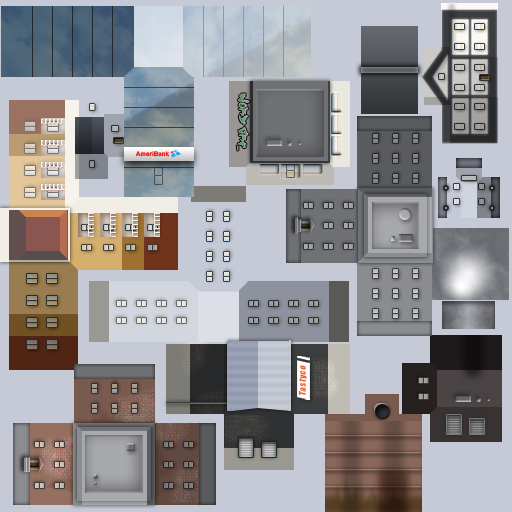
<style>
.page{position:relative;width:512px;height:512px;background:#c5cad6}
.page>*{position:absolute;margin:0}
.t1{font:12px "Street-Writer-noah)";letter-spacing:0.05em}
.t2{font:6.3px "Arial-BoldMT";color:#f70d0d}
.t3{font:8.6px "Impact";letter-spacing:0.05em;color:#f0612f;font-style:italic}
</style>
<div class="page">
<p class="t1" style="left:236px;top:93px;width:14px;height:58px;rotate:90deg">Word Art</p>
<p class="t2" style="left:136px;top:151px;width:33px;height:6px">AmeriBank</p>
<p class="t3" style="left:298px;top:365px;width:9px;height:30px;rotate:-90deg">Tastyco</p>
</div>
